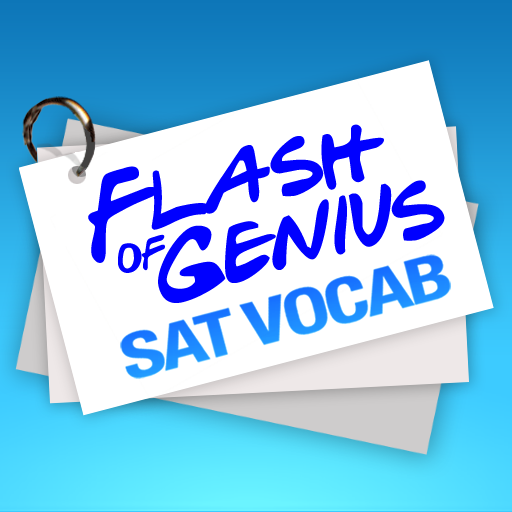
<style>
.page{position:relative;width:512px;height:512px;background:#ffffff}
.page>*{position:absolute;margin:0}
.t1{font:89.5px "GabrielWeissFriendsFont";color:#0000ff}
.t2{font:45px "GabrielWeissFriendsFont";letter-spacing:-0.04em;color:#0000ff}
</style>
<div class="page">
<p class="t1" style="left:88px;top:124px;width:296px;height:139px;rotate:-14deg">Flash</p>
<p class="t1" style="left:158px;top:180px;width:287px;height:123px;rotate:-14deg">Genius</p>
<p class="t2" style="left:118px;top:234px;width:47px;height:39px;rotate:-14deg">of</p>
</div>
